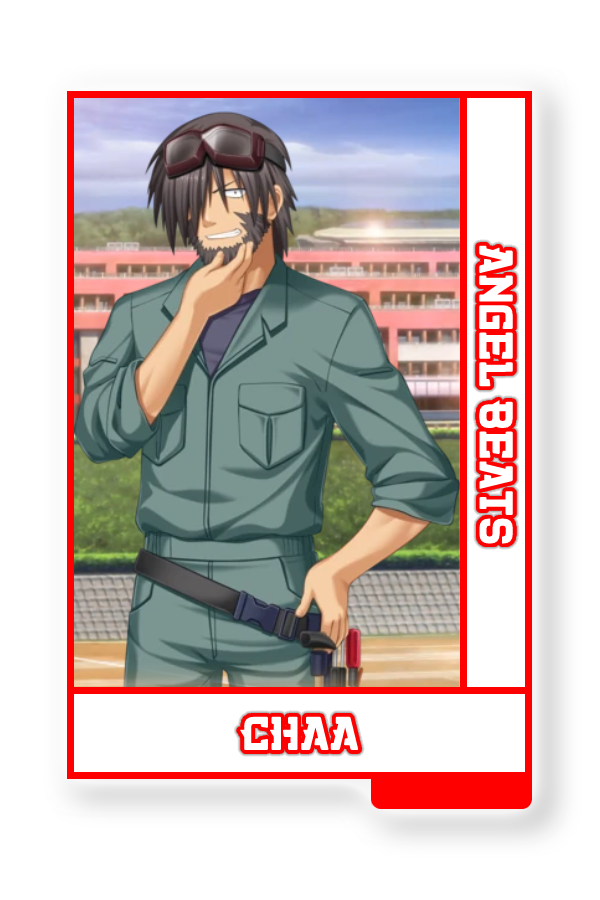
<style>
.page{position:relative;width:600px;height:900px;background:#ffffff}
.page>*{position:absolute;margin:0}
.t1{font:48.8px "KillerCollege";color:#ffffff}
.t2{font:48.6px "KillerCollege";color:#ffffff}
</style>
<div class="page">
<p class="t1" style="left:479px;top:245px;width:34px;height:299px;rotate:90deg">Angel Beats</p>
<p class="t2" style="left:239px;top:716px;width:120px;height:35px">CHAA</p>
</div>
